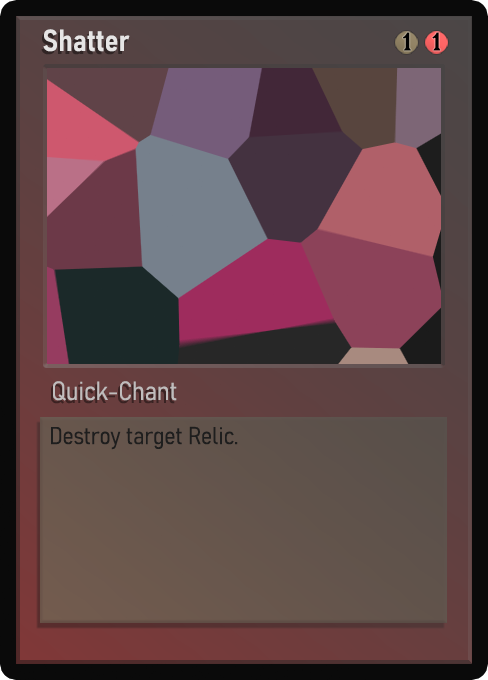
<style>
.page{position:relative;width:488px;height:680px}
.page>*{position:absolute;margin:0}
.t1{font:30px "Bahnschrift-SemiBoldSemiCondensed";color:#f2f2f2;font-weight:bold}
.t2{font:25px "WTRRoycroft";color:#000000;font-weight:bold;scale:1.09 1}
.t3{font:26px "Bahnschrift-LightSemiCondensed";color:#c8c8c8;font-weight:bold}
.t4{font:24px "Bahnschrift-LightSemiCondensed";color:#1e1e1e;font-weight:bold}
</style>
<div class="page">
<p class="t1" style="left:43px;top:29px;width:87px;height:23px;opacity:0.9">Shatter</p>
<p class="t2" style="left:403px;top:32px;width:8px;height:19px">1</p>
<p class="t2" style="left:432px;top:32px;width:9px;height:19px">1</p>
<p class="t3" style="left:53px;top:381px;width:124px;height:20px;opacity:0.9">Quick-Chant</p>
<p class="t4" style="left:51px;top:426px;width:187px;height:24px">Destroy target Relic.</p>
</div>
